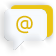
<style>
.page{position:relative;width:56px;height:56px}
.page>*{position:absolute;margin:0}
.t1{font:20.1px "Ubuntu";color:#e0ba0a}
</style>
<div class="page">
<p class="t1" style="left:16px;top:15px;width:17px;height:19px">@</p>
</div>
